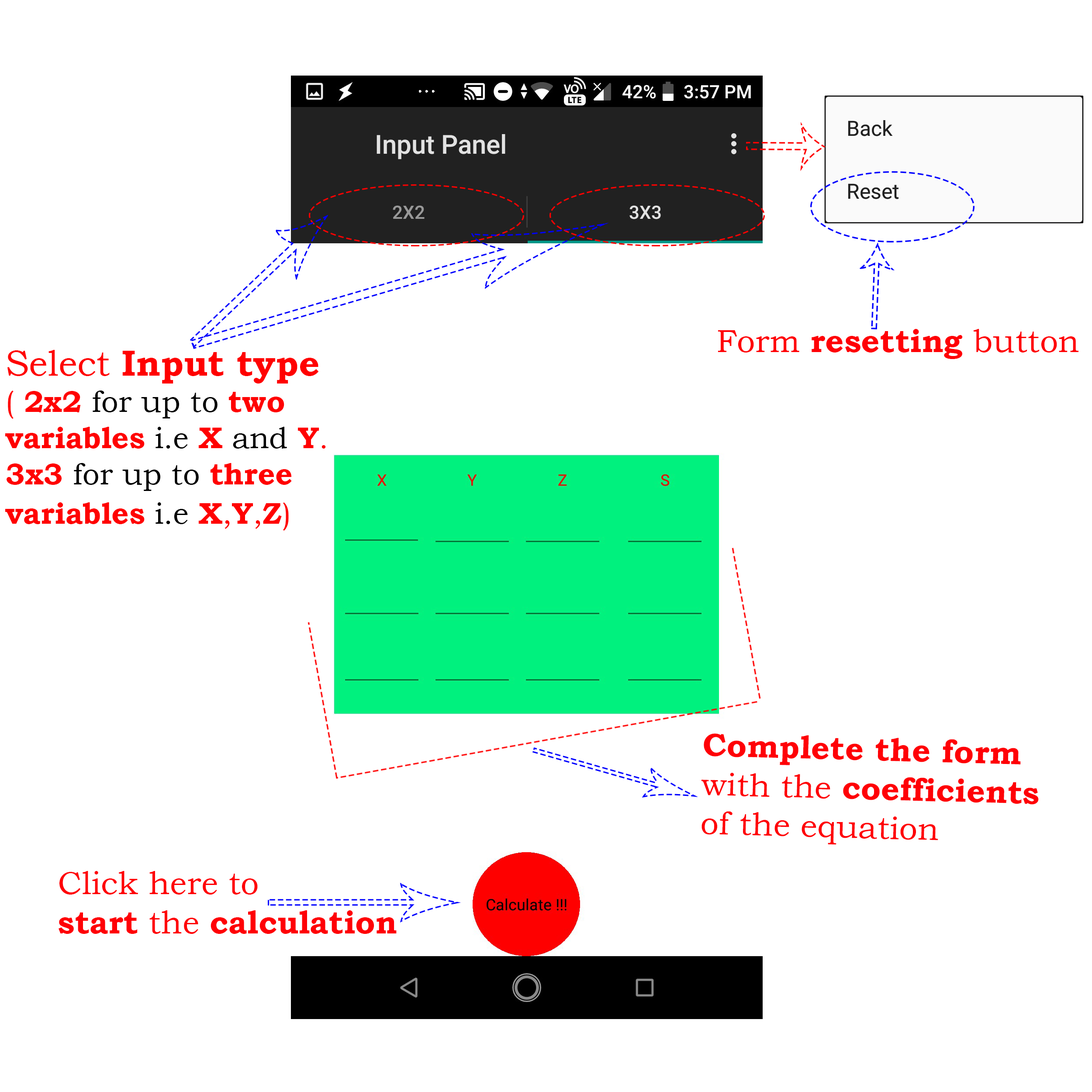
<style>
.page{position:relative;width:1092px;height:1092px;background:#ffffff}
.page>*{position:absolute;margin:0}
.t1{font:32.5px "BookmanOldStyle-Bold";color:#ff0006}
.t2{font:32.5px "BookmanOldStyle";color:#ff0006}
.t3{font:30.2px "BookmanOldStyle-Bold";color:#ff0101}
.t4{font:36.1px "BookmanOldStyle";color:#ff0101}
.t5{font:36.1px "BookmanOldStyle-Bold";color:#ff0101}
.t6{font:30.2px "BookmanOldStyle";color:#ff0101}
.t7{font:30.2px "BookmanOldStyle";color:#000000}
</style>
<div class="page">
<p class="t1" style="left:718px;top:329px;width:360px;height:30px"><span class="t2">Form </span>resetting<span class="t2"> button</span></p>
<p class="t3" style="left:5px;top:350px;width:321px;height:181px"><span class="t4">Select </span><span class="t5">Input type<br></span><span class="t6">( </span>2x2 <span class="t7">for up to </span>two<br>variables <span class="t7">i.e </span>X <span class="t7">and </span>Y<span class="t6">.<br></span>3x3 <span class="t7">for up to </span>three<br>variables <span class="t7">i.e </span>X<span class="t6">,</span>Y<span class="t6">,</span>Z<span class="t6">)</span></p>
<p class="t1" style="left:701px;top:733px;width:338px;height:112px;rotate:2deg">Complete the form<br><span class="t2">with the </span>coefficients<br><span class="t2">of the equation</span></p>
<p class="t2" style="left:58px;top:871px;width:339px;height:63px">Click here to<br><span class="t1">start</span> the <span class="t1">calculation</span></p>
</div>
